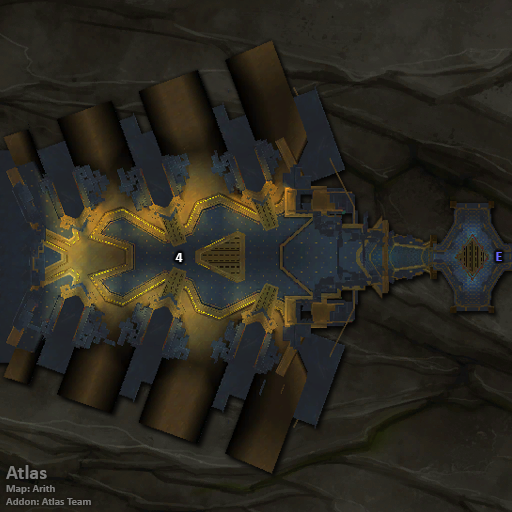
<style>
.page{position:relative;width:512px;height:512px}
.page>*{position:absolute;margin:0}
.t1{font:14px "Calibri-Bold";color:#ffffff}
.t2{font:14px "Calibri-Bold";color:#6666ff}
.t3{font:11px "Calibri-Bold";color:#7d7c7a}
.t4{font:20px "Calibri-Bold";color:#7d7c7a}
</style>
<div class="page">
<p class="t1" style="left:175px;top:253px;width:8px;height:9px">4</p>
<p class="t2" style="left:496px;top:252px;width:6px;height:9px">E</p>
<p class="t3" style="left:6px;top:465px;width:85px;height:40px"><span class="t4">Atlas<br></span>Map: Arith<br>Addon: Atlas Team</p>
</div>
